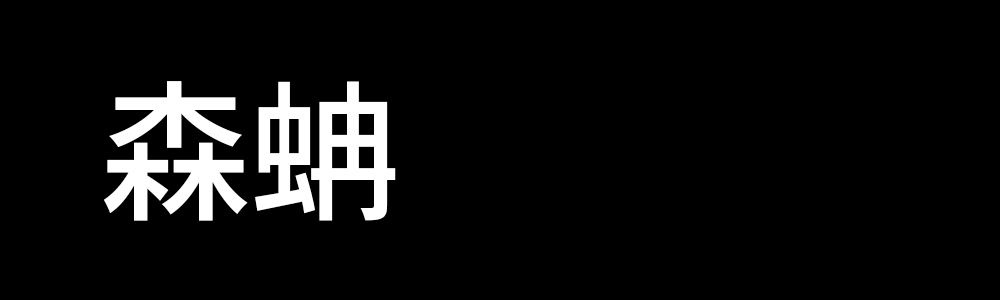
<style>
.page{position:relative;width:1000px;height:300px;background:#000000}
.page>*{position:absolute;margin:0}
.t1{font:150px "SourceHanSansCN-Medium";color:#ffffff}
</style>
<div class="page">
<p class="t1" style="left:103px;top:81px;width:293px;height:140px">森蚺</p>
</div>
